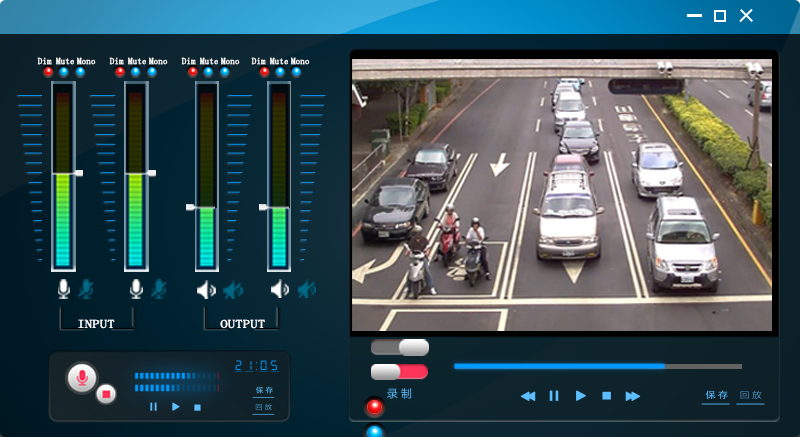
<style>
.page{position:relative;width:800px;height:437px}
.page>*{position:absolute;margin:0}
.t1{font:9px "YouYuan";color:#ffffff;font-weight:bold}
.t2{font:11.6px "YouYuan";color:#ffffff;font-weight:bold;scale:1.22 1}
</style>
<div class="page">
<p class="t1" style="left:37px;top:57px;width:15px;height:8px">Dim</p>
<p class="t1" style="left:56px;top:57px;width:18px;height:8px">Mute</p>
<p class="t1" style="left:77px;top:57px;width:19px;height:8px">Mono</p>
<p class="t1" style="left:109px;top:57px;width:15px;height:8px">Dim</p>
<p class="t1" style="left:128px;top:57px;width:18px;height:8px">Mute</p>
<p class="t1" style="left:149px;top:57px;width:19px;height:8px">Mono</p>
<p class="t1" style="left:181px;top:57px;width:15px;height:8px">Dim</p>
<p class="t1" style="left:200px;top:57px;width:18px;height:8px">Mute</p>
<p class="t1" style="left:221px;top:57px;width:19px;height:8px">Mono</p>
<p class="t1" style="left:251px;top:57px;width:15px;height:8px">Dim</p>
<p class="t1" style="left:270px;top:57px;width:18px;height:8px">Mute</p>
<p class="t1" style="left:291px;top:57px;width:19px;height:8px">Mono</p>
<p class="t2" style="left:78px;top:319px;width:37px;height:10px">INPUT</p>
<p class="t2" style="left:220px;top:319px;width:45px;height:10px">OUTPUT</p>
</div>
